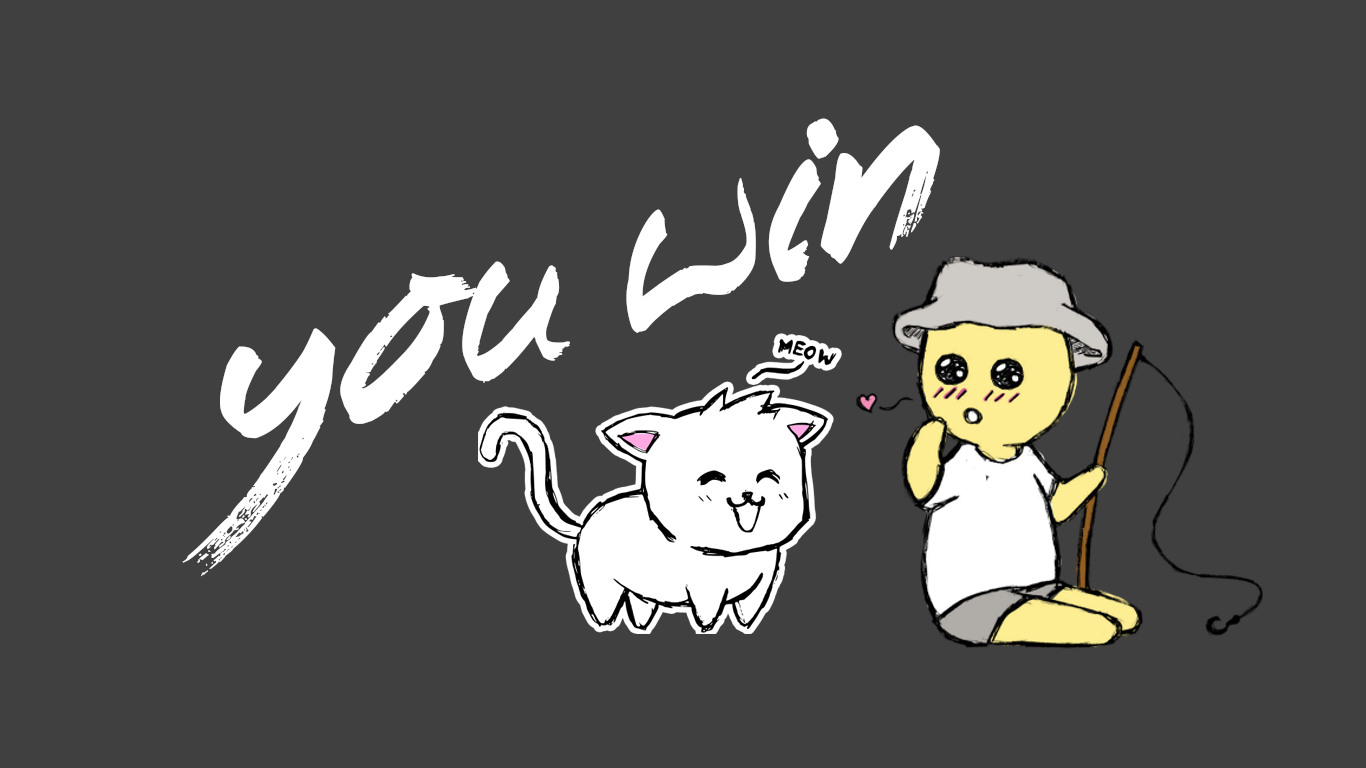
<style>
.page{position:relative;width:1366px;height:768px;background:#404040}
.page>*{position:absolute;margin:0}
.t1{font:222px "BeginningYoga";color:#ffffff}
</style>
<div class="page">
<p class="t1" style="left:182px;top:118px;width:758px;height:459px;rotate:-18deg">you win</p>
</div>
